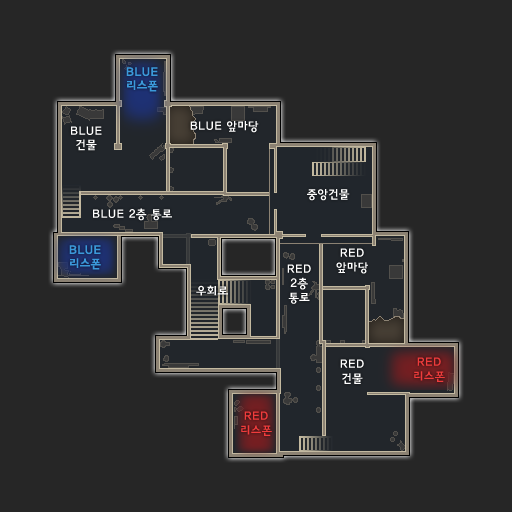
<style>
.page{position:relative;width:512px;height:512px;background:#262626}
.page>*{position:absolute;margin:0}
.t1{font:12px/13.5px "YDIYGO240";color:#3b99da}
.t2{font:12px/13.5px "YDIYGO240";color:#fefefe}
.t3{font:12px "YDIYGO240";color:#fefefe}
.t4{font:12px/14.2px "YDIYGO240";color:#fefefe}
.t5{font:12px/14.2px "YDIYGO240";color:#f03c3c}
</style>
<div class="page">
<p class="t1" style="left:126px;top:67px;width:32px;height:25px;text-align:center">BLUE<br>리스폰</p>
<p class="t2" style="left:71px;top:126px;width:31px;height:25px;text-align:center">BLUE<br>건물</p>
<p class="t3" style="left:190px;top:121px;width:69px;height:12px">BLUE 앞마당</p>
<p class="t3" style="left:307px;top:189px;width:43px;height:12px">중앙건물</p>
<p class="t3" style="left:93px;top:208px;width:79px;height:13px">BLUE 2층 통로</p>
<p class="t1" style="left:69px;top:245px;width:32px;height:25px;text-align:center">BLUE<br>리스폰</p>
<p class="t4" style="left:336px;top:248px;width:32px;height:26px;text-align:center">RED<br>앞마당</p>
<p class="t4" style="left:287px;top:264px;width:24px;height:40px;text-align:center">RED<br>2층<br>통로</p>
<p class="t3" style="left:196px;top:285px;width:32px;height:11px">우회로</p>
<p class="t4" style="left:340px;top:359px;width:24px;height:25px;text-align:center">RED<br>건물</p>
<p class="t5" style="left:414px;top:357px;width:31px;height:25px;text-align:center">RED<br>리스폰</p>
<p class="t5" style="left:241px;top:411px;width:31px;height:25px;text-align:center">RED<br>리스폰</p>
</div>
